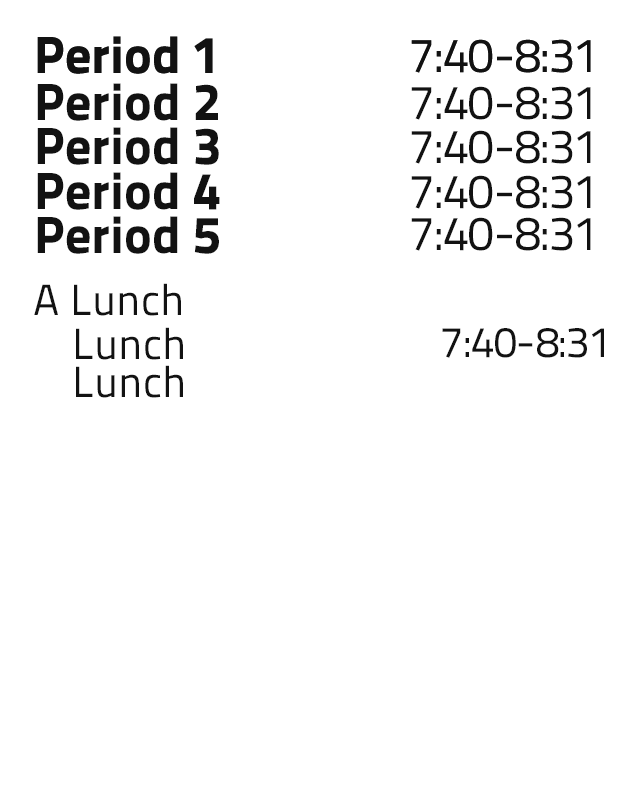
<style>
.page{position:relative;width:640px;height:800px;background:#ffffff}
.page>*{position:absolute;margin:0}
.t1{font:52.3px "TitilliumText25L-999wt";color:#121212}
.t2{font:48px "TitilliumText25L-400wt";color:#121212}
.t3{font:43.6px "TitilliumText25L-400wt";color:#121212}
.t4{font:43.2px "TitilliumText25L-400wt";color:#121212}
</style>
<div class="page">
<p class="t1" style="left:37px;top:36px;width:176px;height:38px">Period 1</p>
<p class="t1" style="left:37px;top:36px;width:176px;height:38px">Period 1</p>
<p class="t2" style="left:411px;top:39px;width:180px;height:34px">7:40-8:31</p>
<p class="t2" style="left:411px;top:39px;width:180px;height:34px">7:40-8:31</p>
<p class="t1" style="left:37px;top:83px;width:181px;height:38px">Period 2</p>
<p class="t2" style="left:411px;top:86px;width:180px;height:34px">7:40-8:31</p>
<p class="t1" style="left:37px;top:127px;width:182px;height:38px">Period 3</p>
<p class="t2" style="left:411px;top:130px;width:180px;height:34px">7:40-8:31</p>
<p class="t1" style="left:37px;top:172px;width:183px;height:38px">Period 4</p>
<p class="t2" style="left:411px;top:175px;width:180px;height:34px">7:40-8:31</p>
<p class="t1" style="left:37px;top:216px;width:182px;height:38px">Period 5</p>
<p class="t2" style="left:411px;top:217px;width:180px;height:34px">7:40-8:31</p>
<p class="t3" style="left:34px;top:283px;width:147px;height:33px">A Lunch</p>
<p class="t3" style="left:76px;top:327px;width:107px;height:33px">Lunch</p>
<p class="t4" style="left:442px;top:328px;width:162px;height:30px">7:40-8:31</p>
<p class="t3" style="left:76px;top:365px;width:107px;height:33px">Lunch</p>
</div>
